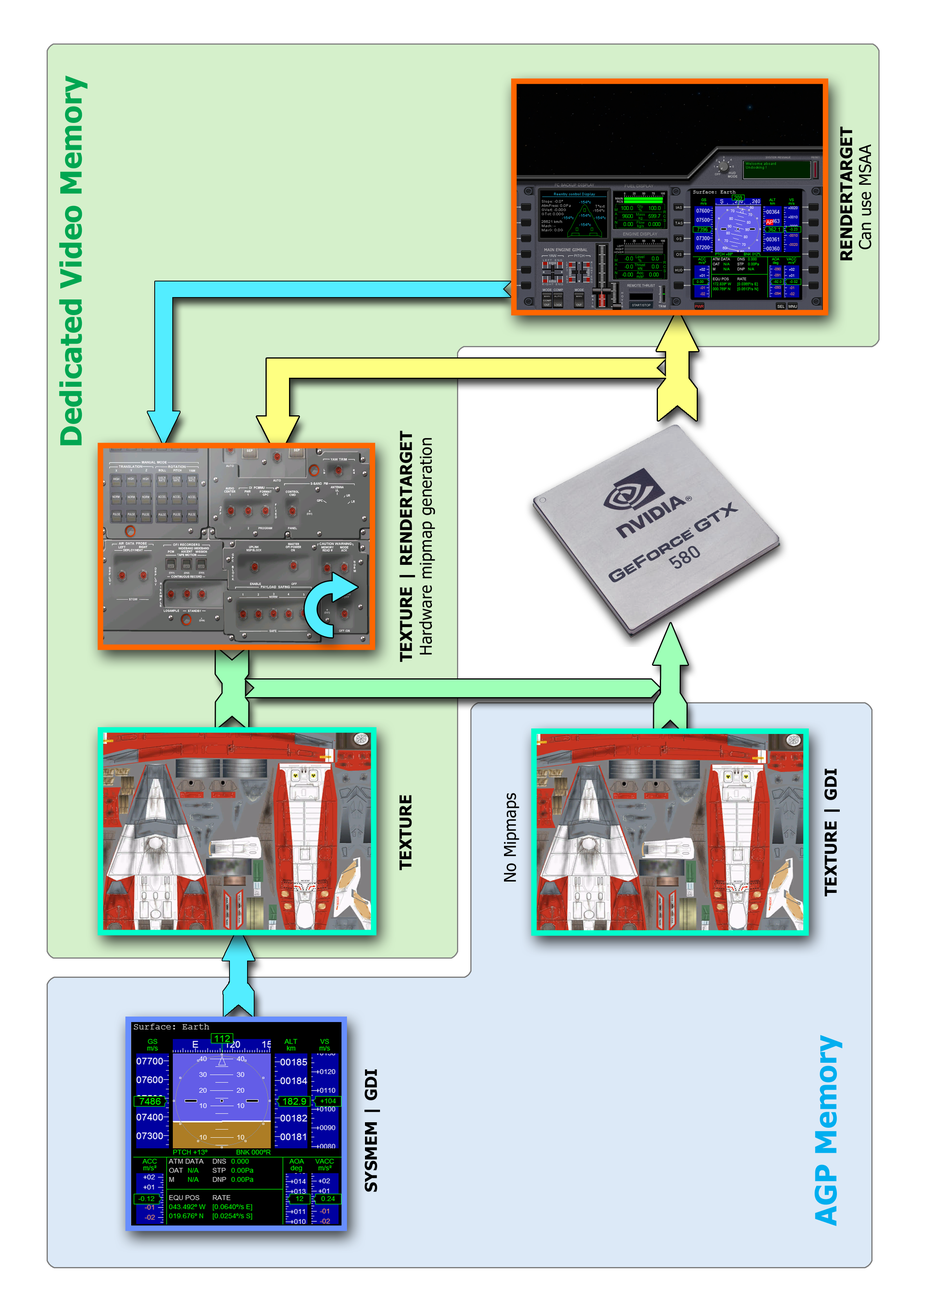
<style>
.page{position:relative;width:925px;height:1289px;background:#ffffff}
.page>*{position:absolute;margin:0}
.t1{font:29.3px "Tahoma-Bold";letter-spacing:0.01em;color:#00a651}
.t2{font:16.3px "Tahoma-Bold";letter-spacing:0.01em;color:#000000}
.t3{font:16.3px "Tahoma";letter-spacing:0.01em;color:#000000}
.t4{font:29.3px "Tahoma-Bold";letter-spacing:0.01em;color:#00aeef}
</style>
<div class="page">
<p class="t1" style="left:59px;top:76px;width:29px;height:370px;rotate:-90deg">Dedicated Video Memory</p>
<p class="t2" style="left:840px;top:126px;width:12px;height:134px;rotate:-90deg">RENDERTARGET</p>
<p class="t3" style="left:859px;top:144px;width:12px;height:105px;rotate:-90deg">Can use MSAA</p>
<p class="t2" style="left:399px;top:431px;width:16px;height:231px;rotate:-90deg">TEXTURE | RENDERTARGET</p>
<p class="t3" style="left:419px;top:438px;width:16px;height:217px;rotate:-90deg">Hardware mipmap generation</p>
<p class="t2" style="left:824px;top:769px;width:16px;height:128px;rotate:-90deg">TEXTURE | GDI</p>
<p class="t2" style="left:399px;top:795px;width:13px;height:75px;rotate:-90deg">TEXTURE</p>
<p class="t3" style="left:504px;top:793px;width:15px;height:89px;rotate:-90deg">No Mipmaps</p>
<p class="t4" style="left:814px;top:1035px;width:28px;height:192px;rotate:-90deg">AGP Memory</p>
<p class="t2" style="left:364px;top:1070px;width:16px;height:122px;rotate:-90deg">SYSMEM | GDI</p>
</div>
